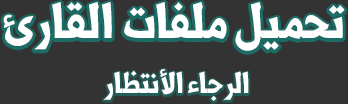
<style>
.page{position:relative;width:348px;height:104px;background:#333333}
.page>*{position:absolute;margin:0}
.t1{font:60px "Shorooq_N1";color:#ffffff}
.t2{font:36px "Shorooq_N1";color:#ffffff}
</style>
<div class="page">
<p class="t1" style="left:3px;top:2px;width:342px;height:49px">تحميل ملفات القارئ</p>
<p class="t2" style="left:103px;top:69px;width:146px;height:32px">الرجاء الأنتظار</p>
</div>
